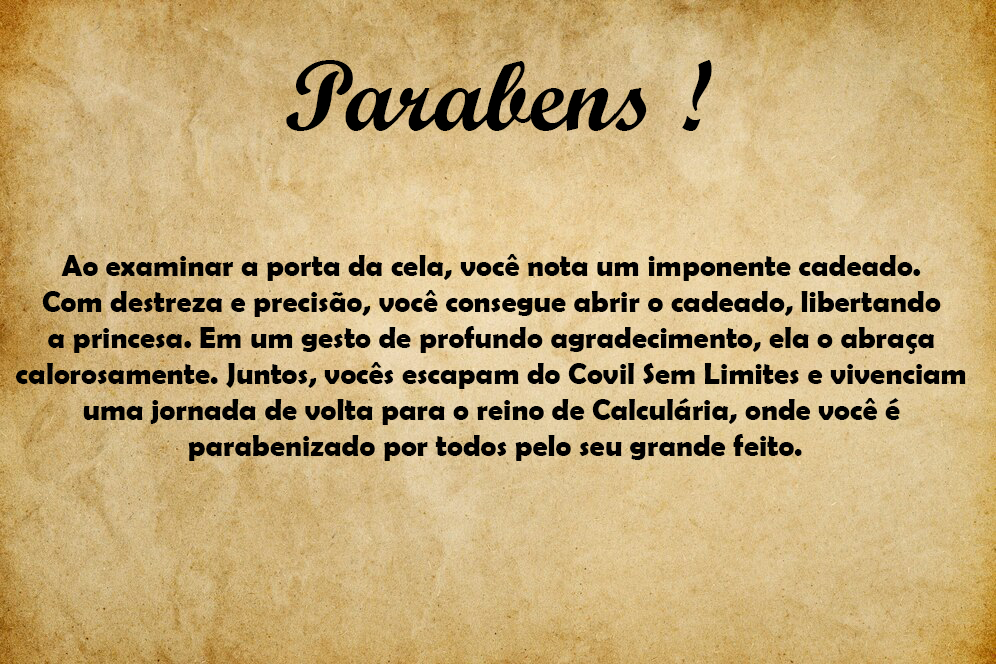
<style>
.page{position:relative;width:996px;height:664px}
.page>*{position:absolute;margin:0}
.t1{font:100px "ScriptMTBold";color:#000000}
.t2{font:30px "BerlinSansFBDemi-Bold";color:#000000}
</style>
<div class="page">
<p class="t1" style="left:286px;top:60px;width:426px;height:71px">Parabens !</p>
<p class="t2" style="left:16px;top:254px;width:950px;height:207px;text-align:center">Ao examinar a porta da cela, você nota um imponente cadeado. <br>Com destreza e precisão, você consegue abrir o cadeado, libertando <br>a princesa. Em um gesto de profundo agradecimento, ela o abraça <br>calorosamente. Juntos, vocês escapam do Covil Sem Limites e vivenciam <br>uma jornada de volta para o reino de Calculária, onde você é <br>parabenizado por todos pelo seu grande feito.</p>
</div>
